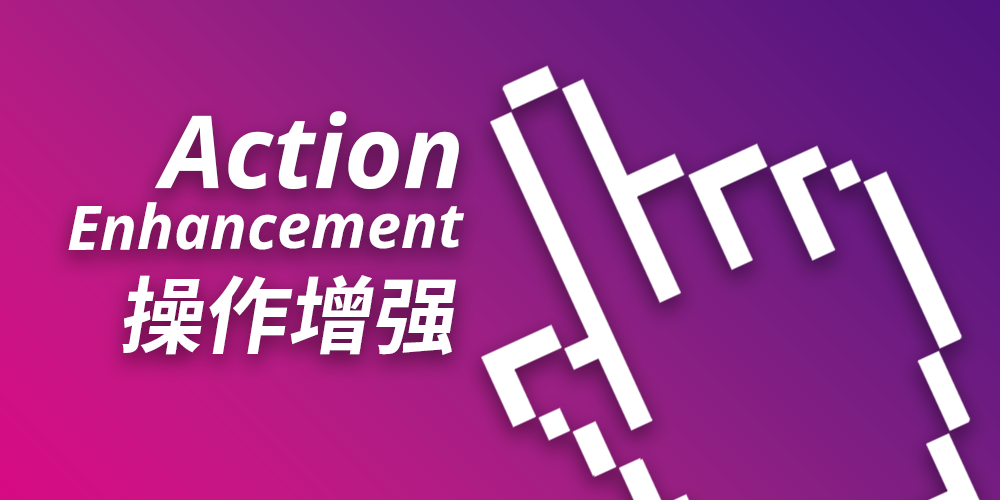
<style>
.page{position:relative;width:1000px;height:500px}
.page>*{position:absolute;margin:0}
.t1{font:101px "NotoSans-BoldItalic";color:#ffffff}
.t2{font:61.3px "NotoSans-BoldItalic";color:#ffffff}
.t3{font:85.6px "NotoSansSC-Bold";color:#ffffff}
</style>
<div class="page">
<p class="t1" style="left:154px;top:111px;width:305px;height:79px">Action</p>
<p class="t2" style="left:68px;top:202px;width:396px;height:48px">Enhancement</p>
<p class="t3" style="left:122px;top:275px;width:334px;height:80px">操作增强</p>
</div>
